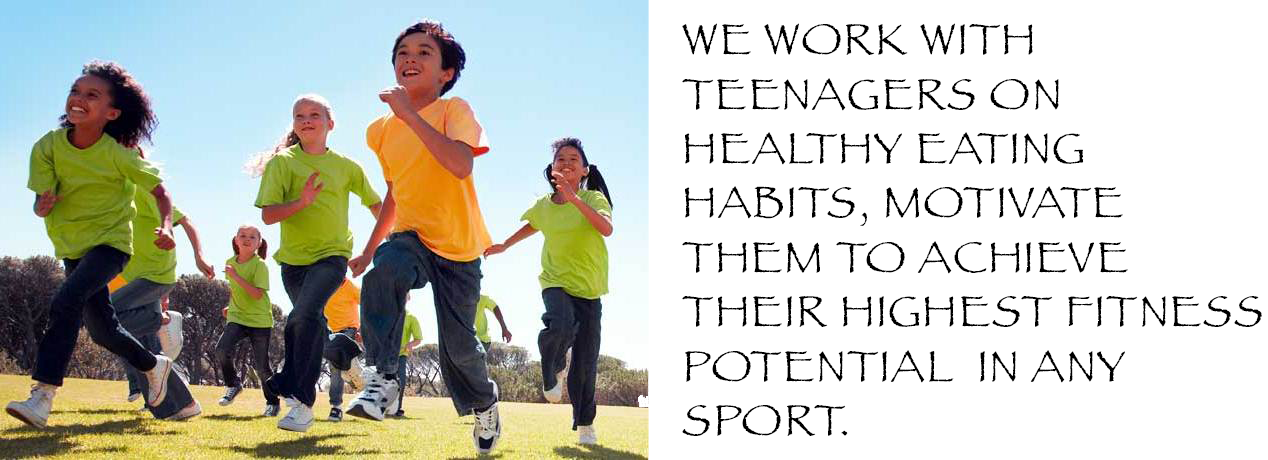
<style>
.page{position:relative;width:1268px;height:460px;background:#ffffff}
.page>*{position:absolute;margin:0}
.t1{font:45.3px "Papyrus";letter-spacing:0.025em;color:#000000}
</style>
<div class="page">
<p class="t1" style="left:682px;top:23px;width:580px;height:413px">WE WORK WITH TEENAGERS ON HEALTHY EATING HABITS, MOTIVATE THEM TO ACHIEVE THEIR HIGHEST FITNESS POTENTIAL  IN ANY SPORT.</p>
</div>
